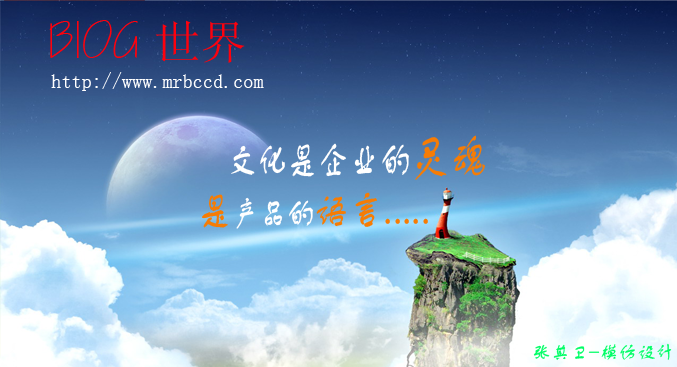
<style>
.page{position:relative;width:677px;height:367px}
.page>*{position:absolute;margin:0}
.t1{font:46.1px "CityBlueprint";color:#fe010d}
.t2{font:46.1px "SimSun";color:#fe010d}
.t3{font:20.2px "SimSun";color:#ffffff}
.t4{font:40.8px "FZSTK--GBK1-0";color:#ffffff;scale:0.76 1}
.t5{font:51px "FZSTK--GBK1-0";color:#f67c04;scale:0.76 1}
.t6{font:42px "FZSTK--GBK1-0";color:#f67c04;scale:0.82 1}
.t7{font:33.6px "FZSTK--GBK1-0";color:#ffffff;scale:0.82 1}
.t8{font:18.7px "FZSTK--GBK1-0";color:#01fe66}
</style>
<div class="page">
<p class="t1" style="left:49px;top:20px;width:196px;height:43px">BIOG <span class="t2">世界</span></p>
<p class="t3" style="left:51px;top:72px;width:213px;height:19px">http://www.mrbccd.com</p>
<p class="t4" style="left:231px;top:135px;width:254px;height:45px">文化是企业的<span class="t5">灵魂</span></p>
<p class="t6" style="left:202px;top:192px;width:226px;height:37px">是<span class="t7">产品的</span>语言.....</p>
<p class="t8" style="left:533px;top:343px;width:139px;height:17px">张其卫-模仿设计</p>
</div>
